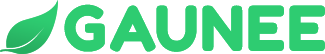
<style>
.page{position:relative;width:325px;height:54px;background:#ffffff}
.page>*{position:absolute;margin:0}
.t1{font:62px "FredokaOne-Regular";letter-spacing:0.02em;color:#2ecc71}
</style>
<div class="page">
<p class="t1" style="left:64px;top:4px;width:261px;height:48px">GAUNEE</p>
</div>
